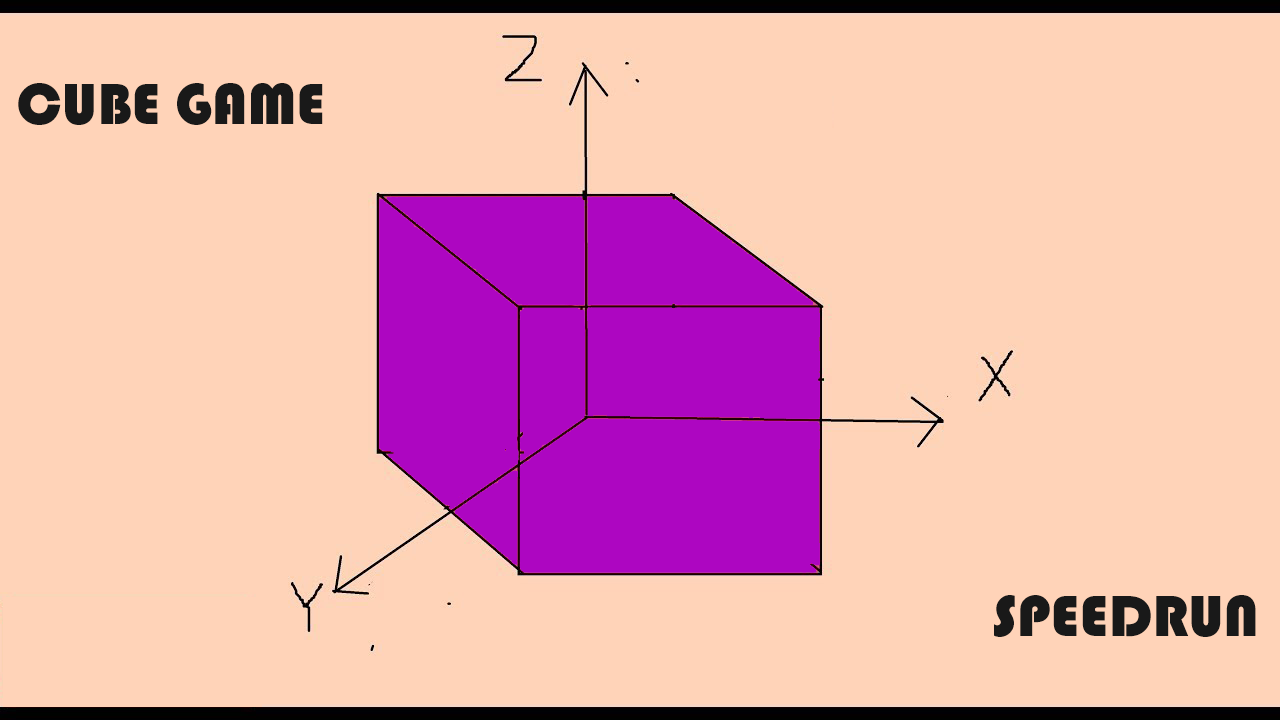
<style>
.page{position:relative;width:1280px;height:720px;background:#ffd3b8}
.page>*{position:absolute;margin:0}
.t1{font:60px "Bauhaus93";color:#191919}
</style>
<div class="page">
<p class="t1" style="left:18px;top:83px;width:305px;height:42px">CUBE GAME</p>
<p class="t1" style="left:994px;top:595px;width:262px;height:42px">SPEEDRUN</p>
</div>
